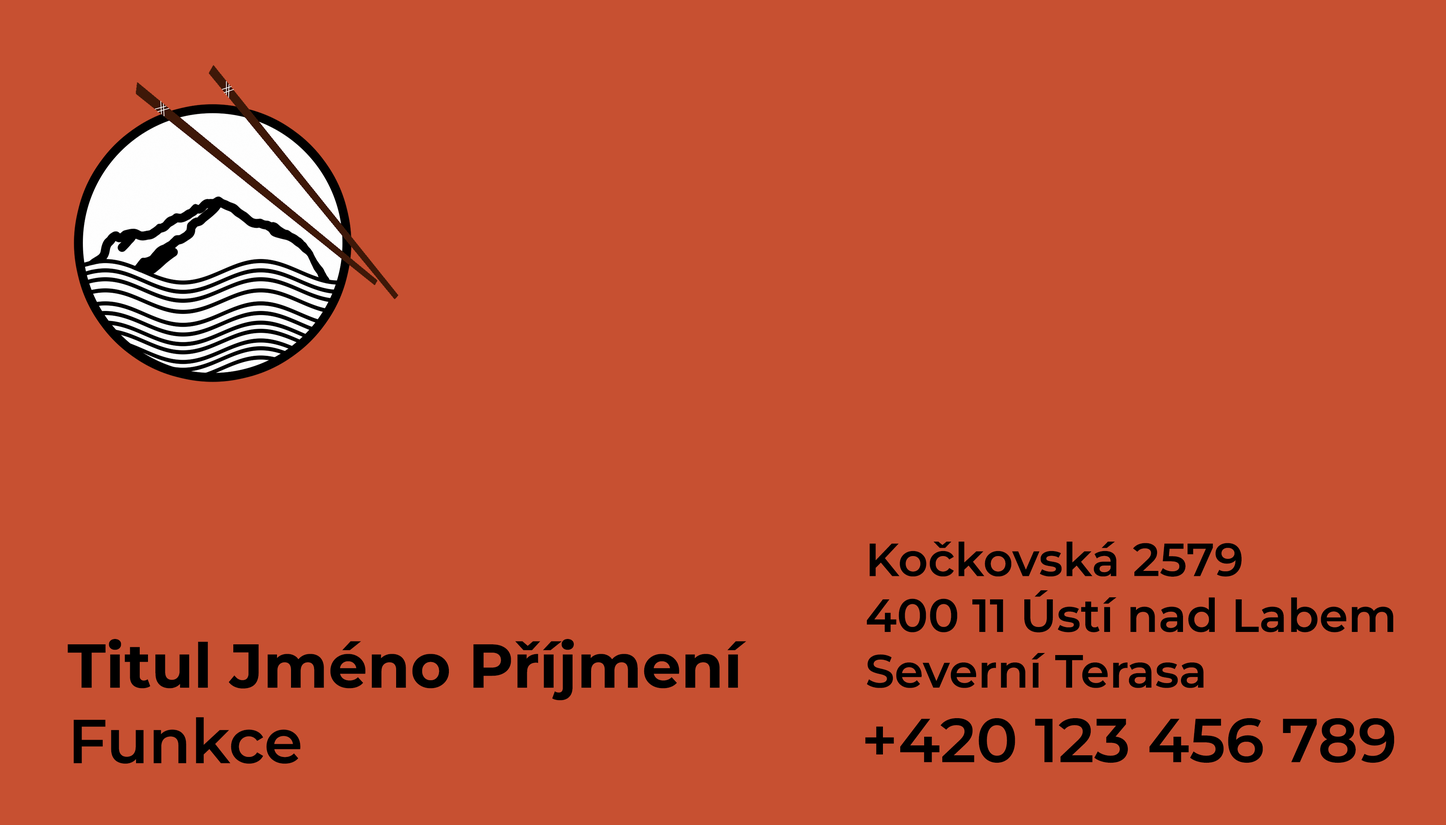
<style>
.page{position:relative;width:1446px;height:825px;background:#c75031}
.page>*{position:absolute;margin:0}
.t1{font:46.4px "Montserrat-SemiBold";color:#000000}
.t2{font:61.8px "Montserrat-Bold";color:#000000}
.t3{font:61.8px "Montserrat-SemiBold";color:#000000}
</style>
<div class="page">
<p class="t1" style="left:867px;top:541px;width:526px;height:147px">Kočkovská 2579<br>400 11 Ústí nad Labem<br>Severní Terasa</p>
<p class="t2" style="left:68px;top:639px;width:679px;height:61px">Titul Jméno Příjmení</p>
<p class="t3" style="left:73px;top:717px;width:228px;height:47px">Funkce</p>
<p class="t3" style="left:865px;top:718px;width:530px;height:45px">+420 123 456 789</p>
</div>
